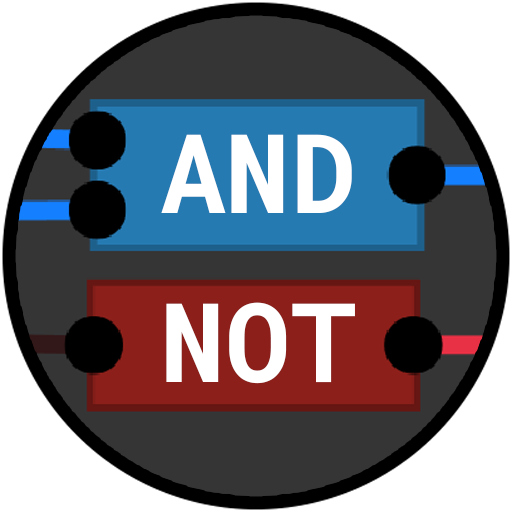
<style>
.page{position:relative;width:512px;height:512px;background:#ffffff}
.page>*{position:absolute;margin:0}
.t1{font:110.4px "RobotoMono-Bold";color:#ffffff}
</style>
<div class="page">
<p class="t1" style="left:161px;top:134px;width:191px;height:79px">AND</p>
<p class="t1" style="left:166px;top:302px;width:189px;height:82px">NOT</p>
</div>
